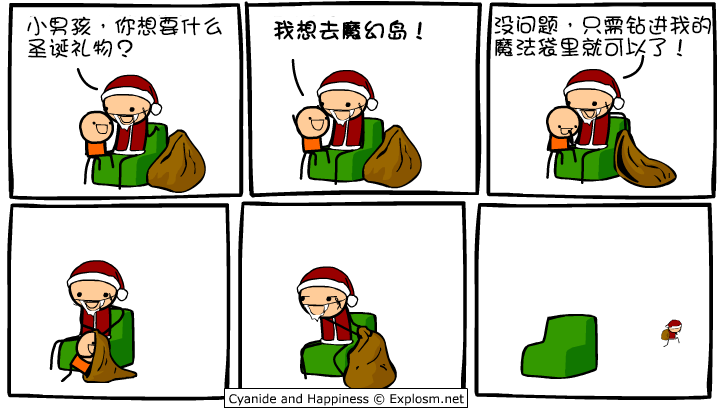
<style>
.page{position:relative;width:720px;height:410px;background:#ffffff}
.page>*{position:absolute;margin:0}
.t1{font:22px/22px "DFGirl";color:#000000}
.t2{font:22px "DFGirl";color:#000000;font-weight:bold}
</style>
<div class="page">
<p class="t1" style="left:27px;top:16px;width:195px;height:42px">小男孩，你想要什么<br>圣诞礼物？</p>
<p class="t1" style="left:494px;top:15px;width:217px;height:42px">没问题，只需钻进我的<br>魔法袋里就可以了！</p>
<p class="t2" style="left:273px;top:19px;width:149px;height:21px">我想去魔幻岛！</p>
</div>
